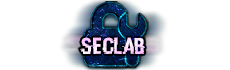
<style>
.page{position:relative;width:230px;height:70px;background:#ffffff}
.page>*{position:absolute;margin:0}
.t1{font:23.3px "HACKED";color:#ffdfff}
</style>
<div class="page">
<p class="t1" style="left:80px;top:37px;width:65px;height:17px">seclab</p>
</div>
